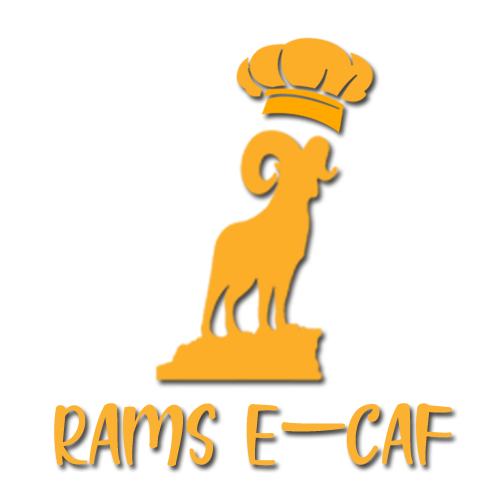
<style>
.page{position:relative;width:500px;height:500px;background:#ffffff}
.page>*{position:absolute;margin:0}
.t1{font:109.6px "Yourdream";color:#fbb131}
</style>
<div class="page">
<p class="t1" style="left:54px;top:403px;width:398px;height:63px">RAMS E-CAF</p>
</div>
